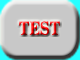
<style>
.page{position:relative;width:80px;height:60px;background:#c8c8c8}
.page>*{position:absolute;margin:0}
.t1{font:18px "MyungjoXB-HM"}
</style>
<div class="page">
<p class="t1" style="left:19px;top:21px;width:41px;height:14px">TEST</p>
</div>
